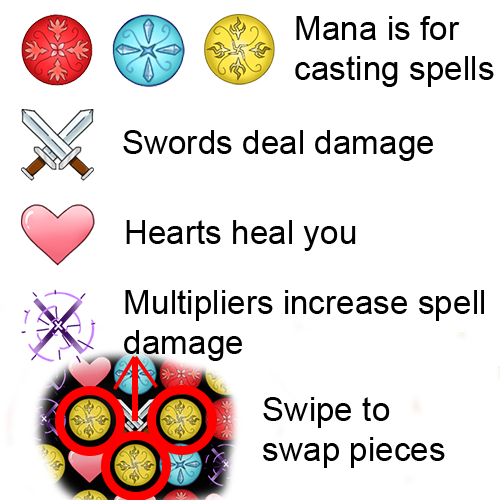
<style>
.page{position:relative;width:500px;height:500px;background:#ffffff}
.page>*{position:absolute;margin:0}
.t1{font:33.3px "ArialMT";color:#000000}
</style>
<div class="page">
<p class="t1" style="left:295px;top:16px;width:199px;height:71px">Mana is for<br>casting spells</p>
<p class="t1" style="left:123px;top:130px;width:310px;height:31px">Swords deal damage</p>
<p class="t1" style="left:126px;top:220px;width:230px;height:31px">Hearts heal you</p>
<p class="t1" style="left:124px;top:290px;width:360px;height:71px">Multipliers increase spell<br>damage</p>
<p class="t1" style="left:263px;top:397px;width:182px;height:71px">Swipe to <br>swap pieces</p>
</div>
